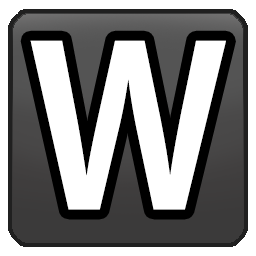
<style>
.page{position:relative;width:256px;height:256px;background:#ffffff}
.page>*{position:absolute;margin:0}
.t1{font:250px "MyriadConceptRoman-SemiboldSemiCondensed";color:#ffffff}
</style>
<div class="page">
<p class="t1" style="left:30px;top:40px;width:196px;height:170px">W</p>
</div>
